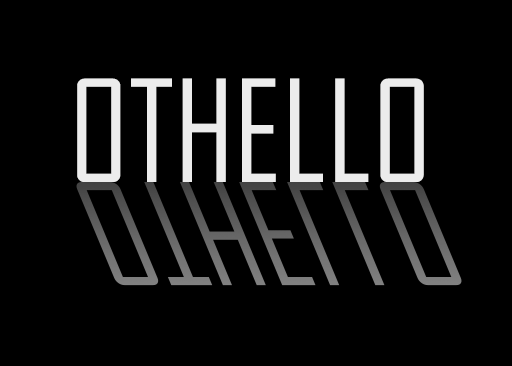
<style>
.page{position:relative;width:512px;height:366px;background:#000000}
.page>*{position:absolute;margin:0}
.t1{font:134.9px "AgencyFB-Reg";color:#ececec}
</style>
<div class="page">
<p class="t1" style="left:77px;top:78px;width:347px;height:104px">OTHELLO</p>
</div>
